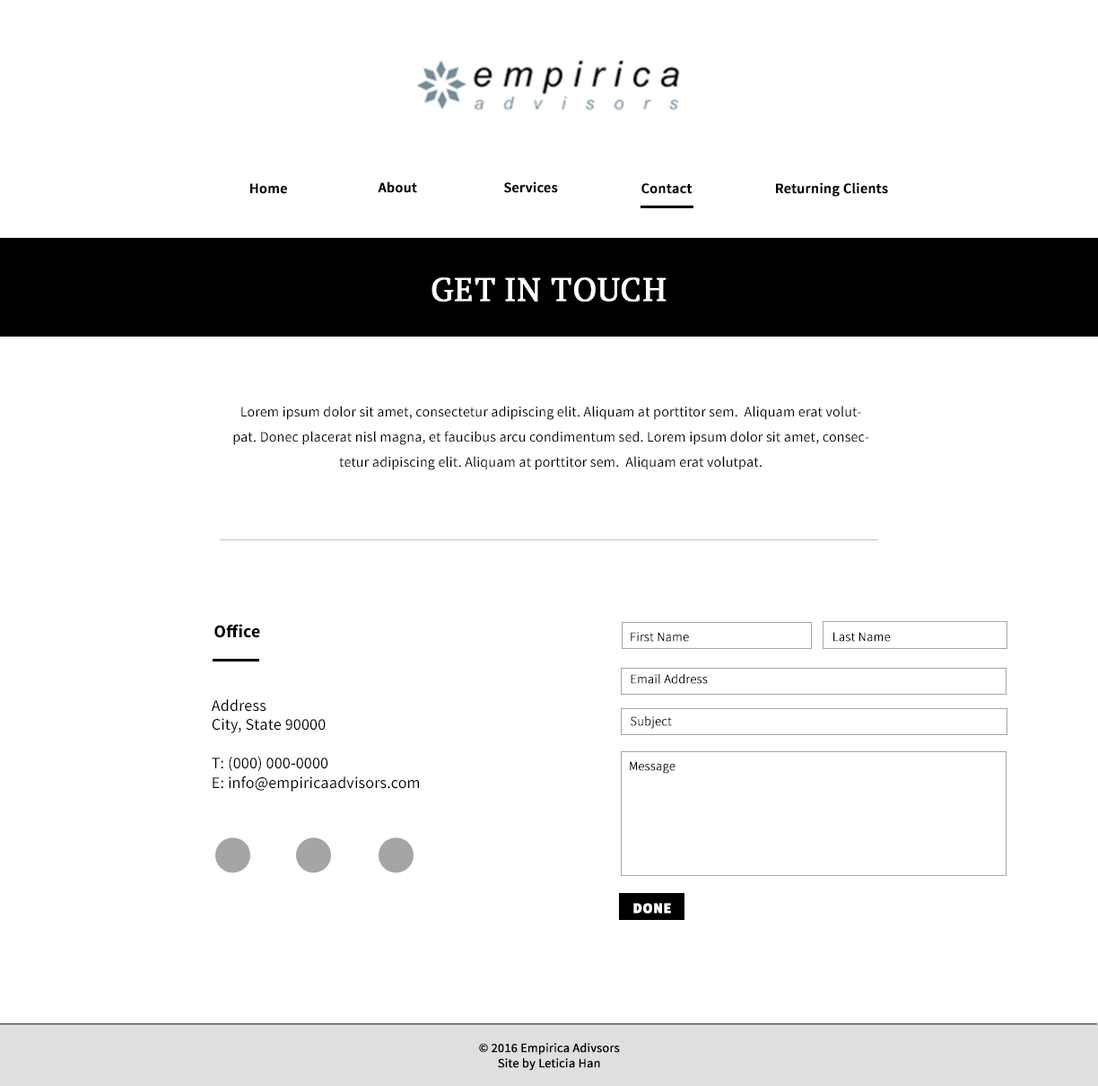
<style>
.page{position:relative;width:1098px;height:1086px;background:#ffffff}
.page>*{position:absolute;margin:0}
.t1{font:14.4px "SourceSansPro-Semibold";color:#000000;font-weight:bold}
.t2{font:32.3px "PTSerif-Regular";letter-spacing:0.01em;color:#ffffff;text-transform:uppercase;font-weight:bold}
.t3{font:14.4px/25.1px "SourceSansPro-Regular";letter-spacing:0.01em;color:#000000}
.t4{font:17.9px "SourceSansPro-Bold";letter-spacing:0.01em;color:#000000}
.t5{font:12.6px "SourceSansPro-Light";letter-spacing:0.01em;color:#000000;font-weight:bold}
.t6{font:16.2px "SourceSansPro-Regular";letter-spacing:0.01em;color:#000000}
.t7{font:14.4px "SourceSansPro-Black";letter-spacing:0.01em;color:#ffffff;font-weight:bold}
.t8{font:12.6px "SourceSansPro-Regular";color:#000000;font-weight:bold}
</style>
<div class="page">
<p class="t1" style="left:250px;top:183px;width:37px;height:11px">Home</p>
<p class="t1" style="left:378px;top:181px;width:39px;height:12px">About</p>
<p class="t1" style="left:503px;top:181px;width:55px;height:12px">Services</p>
<p class="t1" style="left:642px;top:183px;width:51px;height:11px">Contact</p>
<p class="t1" style="left:776px;top:182px;width:112px;height:15px">Returning Clients</p>
<p class="t2" style="left:432px;top:277px;width:235px;height:24px">Get in Touch</p>
<p class="t3" style="left:233px;top:406px;width:636px;height:64px;text-align:center">Lorem ipsum dolor sit amet, consectetur adipiscing elit. Aliquam at porttitor sem.  Aliquam erat volutpat. Donec placerat nisl magna, et faucibus arcu condimentum sed. Lorem ipsum dolor sit amet, consectetur adipiscing elit. Aliquam at porttitor sem.  Aliquam erat volutpat.</p>
<p class="t4" style="left:214px;top:624px;width:46px;height:14px">Office</p>
<p class="t5" style="left:631px;top:632px;width:58px;height:10px">First Name</p>
<p class="t5" style="left:834px;top:632px;width:57px;height:10px">Last Name</p>
<p class="t5" style="left:631px;top:674px;width:77px;height:10px">Email Address</p>
<p class="t6" style="left:211px;top:699px;width:208px;height:92px">Address<br>City, State 90000<br><br>T: (000) 000-0000<br>E: info@empiricaadvisors.com</p>
<p class="t5" style="left:631px;top:716px;width:41px;height:13px">Subject</p>
<p class="t5" style="left:630px;top:761px;width:46px;height:12px">Message</p>
<p class="t7" style="left:633px;top:903px;width:38px;height:10px">DONE</p>
<p class="t8" style="left:479px;top:1043px;width:141px;height:27px;text-align:center">© 2016 Empirica Adivsors<br>Site by Leticia Han</p>
</div>
